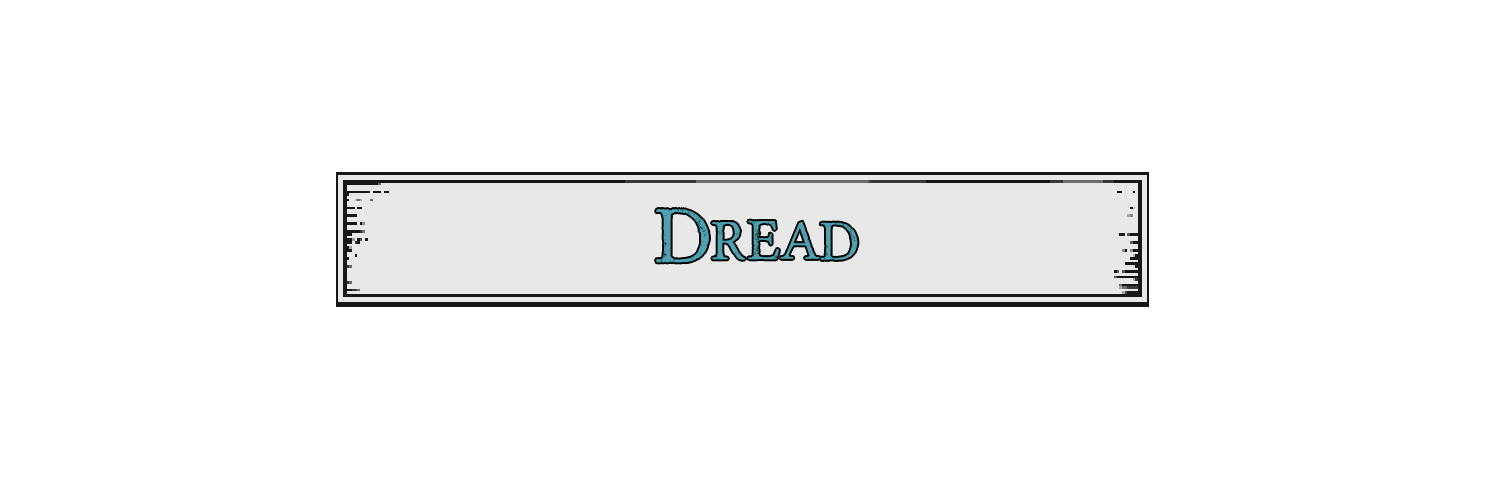
<style>
.page{position:relative;width:1504px;height:498px;background:#ffffff}
.page>*{position:absolute;margin:0}
.t1{font:60px "Portmanteau-Regular";letter-spacing:-0.06em;color:#4ea1b0;font-variant:small-caps}
</style>
<div class="page">
<p class="t1" style="left:656px;top:209px;width:202px;height:54px">Dread</p>
</div>
